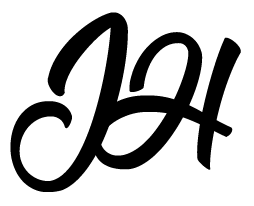
<style>
.page{position:relative;width:254px;height:206px;background:#ffffff}
.page>*{position:absolute;margin:0}
.t1{font:113.7px "NatureBeautyPersonalUse";letter-spacing:0.01em;color:#000000;text-transform:uppercase}
</style>
<div class="page">
<p class="t1" style="left:10px;top:12px;width:118px;height:180px">j</p>
<p class="t1" style="left:91px;top:32px;width:150px;height:138px">h</p>
</div>
